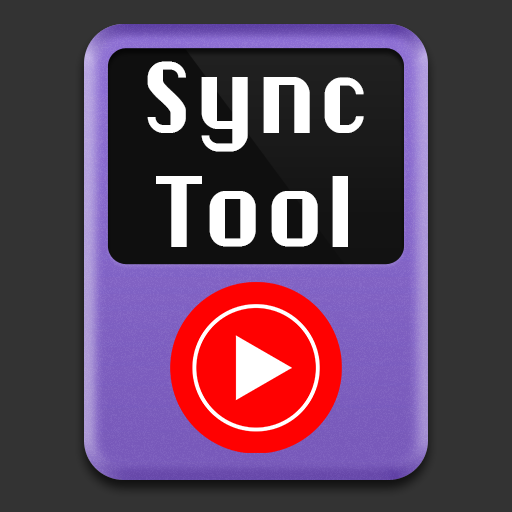
<style>
.page{position:relative;width:512px;height:512px;background:#333333}
.page>*{position:absolute;margin:0}
.t1{font:95.1px "ChicagoFLF";color:#ffffff}
</style>
<div class="page">
<p class="t1" style="left:147px;top:61px;width:217px;height:186px;text-align:center">Sync<br>Tool</p>
</div>
